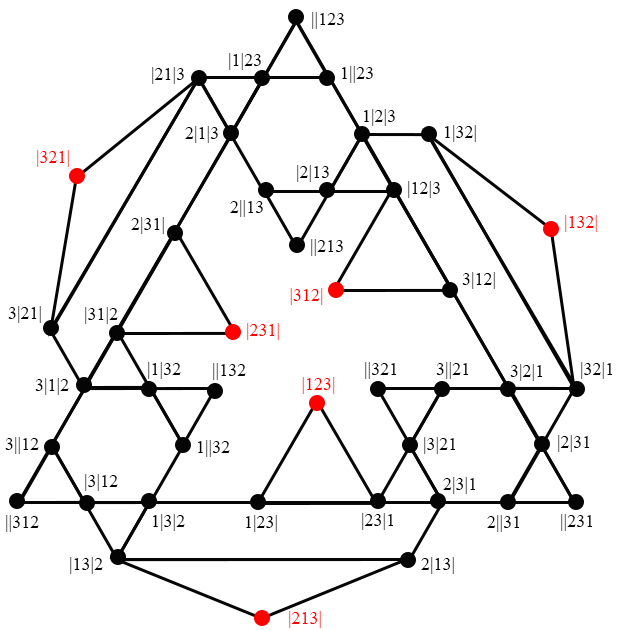
<style>
.page{position:relative;width:630px;height:630px;background:#ffffff}
.page>*{position:absolute;margin:0}
.t1{font:18px "TimesNewRomanPSMT";color:#000000}
.t2{font:18px "TimesNewRomanPSMT";color:#ff0000}
</style>
<div class="page">
<p class="t1" style="left:312px;top:12px;width:32px;height:17px">||123</p>
<p class="t1" style="left:229px;top:53px;width:32px;height:17px">|1|23</p>
<p class="t1" style="left:152px;top:67px;width:32px;height:17px">|21|3</p>
<p class="t1" style="left:342px;top:66px;width:31px;height:17px">1||23</p>
<p class="t1" style="left:364px;top:109px;width:31px;height:17px">1|2|3</p>
<p class="t1" style="left:185px;top:126px;width:33px;height:17px">2|1|3</p>
<p class="t1" style="left:445px;top:125px;width:31px;height:17px">1|32|</p>
<p class="t2" style="left:37px;top:150px;width:32px;height:17px">|321|</p>
<p class="t1" style="left:297px;top:165px;width:32px;height:17px">|2|13</p>
<p class="t1" style="left:408px;top:181px;width:32px;height:17px">|12|3</p>
<p class="t1" style="left:230px;top:200px;width:33px;height:17px">2||13</p>
<p class="t1" style="left:131px;top:217px;width:33px;height:17px">2|31|</p>
<p class="t2" style="left:565px;top:215px;width:32px;height:17px">|132|</p>
<p class="t1" style="left:311px;top:239px;width:32px;height:17px">||213</p>
<p class="t1" style="left:462px;top:272px;width:33px;height:17px">3|12|</p>
<p class="t2" style="left:290px;top:288px;width:33px;height:17px">|312|</p>
<p class="t1" style="left:8px;top:306px;width:33px;height:17px">3|21|</p>
<p class="t1" style="left:85px;top:307px;width:33px;height:17px">|31|2</p>
<p class="t2" style="left:247px;top:323px;width:32px;height:17px">|231|</p>
<p class="t1" style="left:148px;top:362px;width:33px;height:17px">|1|32</p>
<p class="t1" style="left:213px;top:363px;width:33px;height:17px">||132</p>
<p class="t1" style="left:365px;top:362px;width:32px;height:17px">||321</p>
<p class="t1" style="left:436px;top:362px;width:33px;height:17px">3||21</p>
<p class="t1" style="left:510px;top:364px;width:33px;height:17px">3|2|1</p>
<p class="t1" style="left:581px;top:362px;width:32px;height:17px">|32|1</p>
<p class="t2" style="left:302px;top:377px;width:33px;height:17px">|123|</p>
<p class="t1" style="left:35px;top:378px;width:34px;height:17px">3|1|2</p>
<p class="t1" style="left:5px;top:437px;width:34px;height:17px">3||12</p>
<p class="t1" style="left:424px;top:437px;width:32px;height:17px">|3|21</p>
<p class="t1" style="left:558px;top:435px;width:32px;height:17px">|2|31</p>
<p class="t1" style="left:198px;top:440px;width:32px;height:17px">1||32</p>
<p class="t1" style="left:85px;top:474px;width:33px;height:17px">|3|12</p>
<p class="t1" style="left:443px;top:477px;width:33px;height:17px">2|3|1</p>
<p class="t1" style="left:6px;top:515px;width:33px;height:17px">||312</p>
<p class="t1" style="left:153px;top:514px;width:32px;height:17px">1|3|2</p>
<p class="t1" style="left:246px;top:515px;width:31px;height:17px">1|23|</p>
<p class="t1" style="left:362px;top:513px;width:32px;height:17px">|23|1</p>
<p class="t1" style="left:487px;top:515px;width:33px;height:17px">2||31</p>
<p class="t1" style="left:561px;top:514px;width:32px;height:17px">||231</p>
<p class="t1" style="left:70px;top:557px;width:33px;height:17px">|13|2</p>
<p class="t1" style="left:421px;top:557px;width:33px;height:17px">2|13|</p>
<p class="t2" style="left:289px;top:611px;width:32px;height:17px">|213|</p>
</div>
